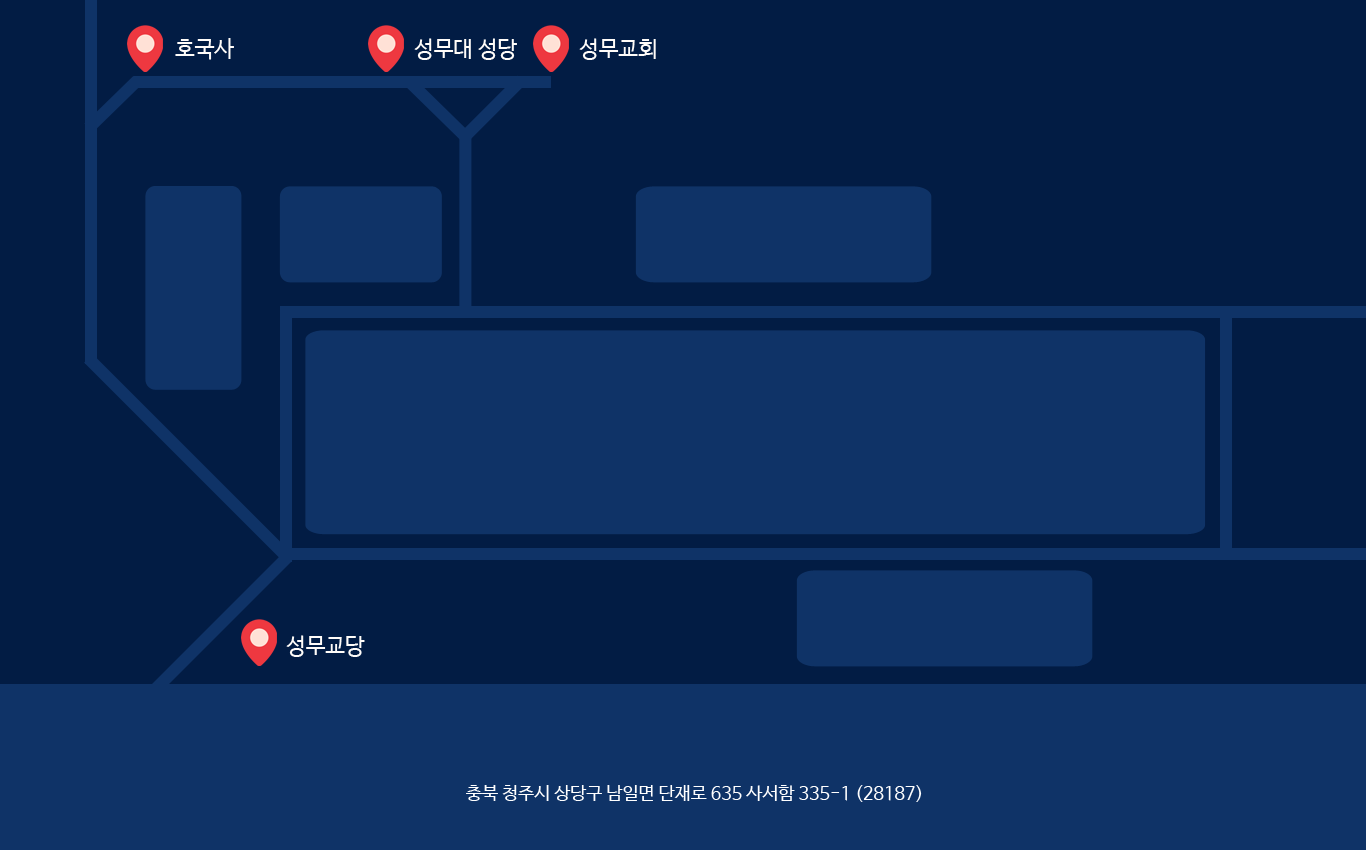
<style>
.page{position:relative;width:1366px;height:850px;background:#021c44}
.page>*{position:absolute;margin:0}
.t1{font:22px "NanumBarunGothic";color:#fffcf9}
.t2{font:18px "NanumBarunGothic";color:#ffffff}
</style>
<div class="page">
<p class="t1" style="left:175px;top:38px;width:59px;height:22px">호국사</p>
<p class="t1" style="left:414px;top:38px;width:103px;height:22px">성무대 성당</p>
<p class="t1" style="left:579px;top:38px;width:77px;height:22px">성무교회</p>
<p class="t1" style="left:286px;top:635px;width:79px;height:22px">성무교당</p>
<p class="t2" style="left:466px;top:785px;width:456px;height:17px">충북 청주시 상당구 남일면 단재로 635 사서함 335-1 (28187)</p>
</div>
